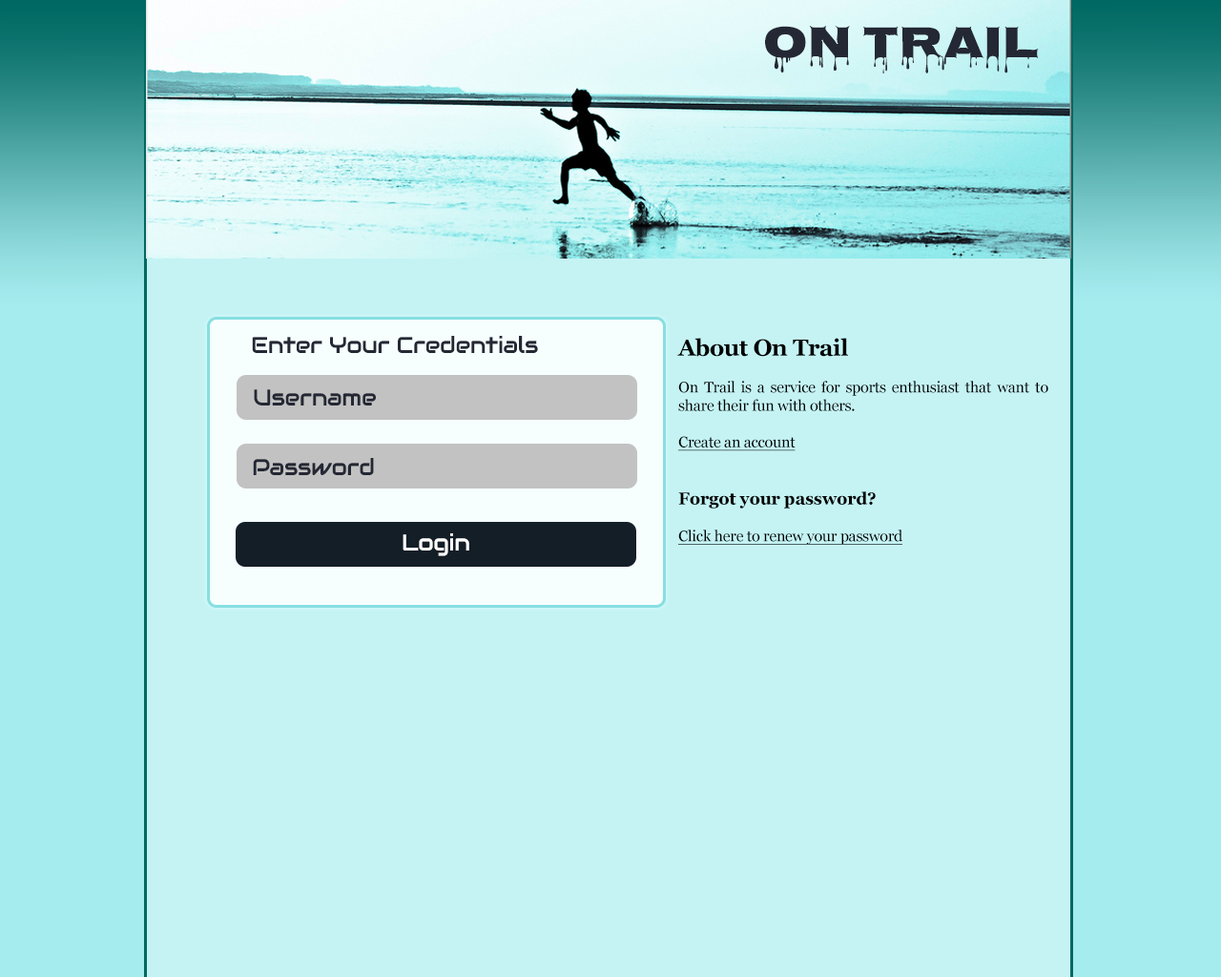
<style>
.page{position:relative;width:1221px;height:977px;background:#c5f3f4}
.page>*{position:absolute;margin:0}
.t1{font:45.8px "Nosifer-Regular";letter-spacing:-0.015em;color:#242834}
.t2{font:22.9px "Audiowide-Regular";letter-spacing:-0.015em;color:#242834}
.t3{font:15.3px "Georgia";letter-spacing:-0.015em;color:#000000}
.t4{font:15.3px "Audiowide-Regular";letter-spacing:-0.015em;color:#242834}
.t5{font:22.9px "Georgia-Bold";letter-spacing:-0.015em;color:#000000}
.t6{font:15.3px "Georgia";letter-spacing:-0.015em;color:#000000;text-decoration:underline}
.t7{font:17.2px "Georgia-Bold";letter-spacing:-0.015em;color:#000000}
.t8{font:22.9px "Audiowide-Regular";letter-spacing:-0.015em;color:#ffffff}
</style>
<div class="page">
<p class="t1" style="left:765px;top:26px;width:274px;height:47px">On Trail</p>
<p class="t2" style="left:252px;top:336px;width:286px;height:17px">Enter Your Credentials</p>
<p class="t3" style="left:677px;top:338px;width:371px;height:207px;text-align:justify"><span class="t4"><br></span><span class="t5">About On Trail<br></span><br>On Trail is a service for sports enthusiast that want to share their fun with others.<br><br><span class="t6">Create an account<br><br><br></span><span class="t7">Forgot your password?<br></span><br><span class="t6">Click here to renew your password</span></p>
<p class="t2" style="left:254px;top:389px;width:122px;height:16px">Username</p>
<p class="t2" style="left:253px;top:458px;width:121px;height:17px">Password</p>
<p class="t8" style="left:403px;top:533px;width:66px;height:23px">Login</p>
</div>
